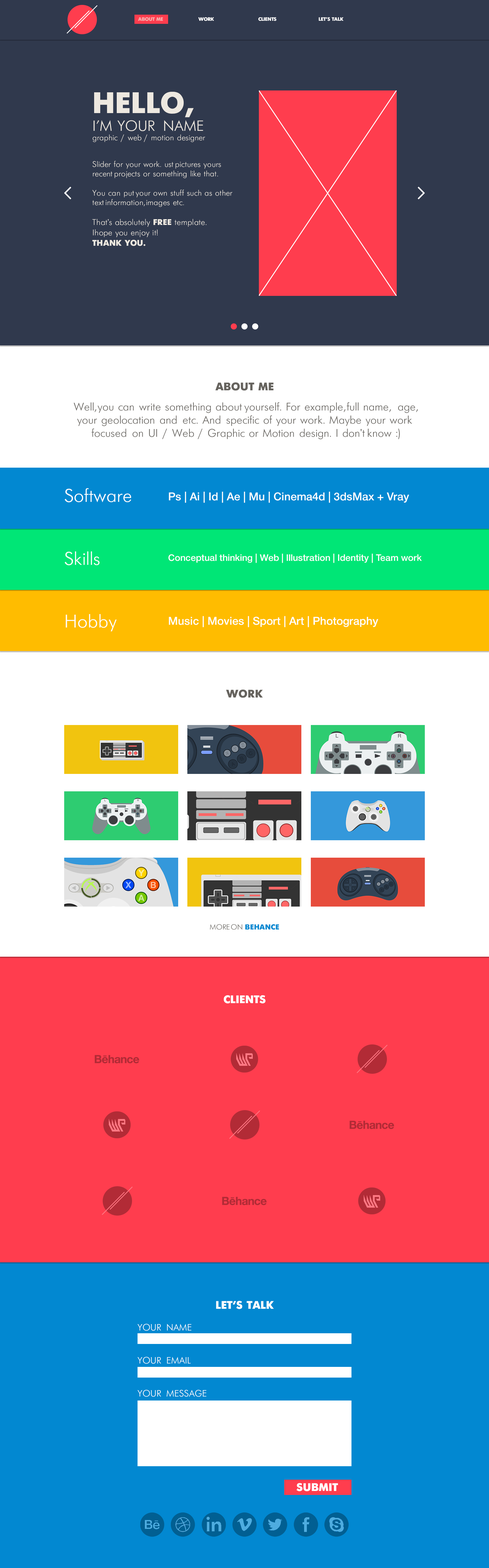
<style>
.page{position:relative;width:489px;height:1568px;background:#ff3d4e}
.page>*{position:absolute;margin:0}
.t1{font:4.9px "Futuris-Bold";letter-spacing:-0.025em;color:#f4b1af;text-transform:uppercase}
.t2{font:4.9px "Futuris-Bold";letter-spacing:-0.025em;color:#ffffff;text-transform:uppercase}
.t3{font:7.9px "Futuris";color:#ede8e0}
.t4{font:29.6px/18.6px "Futuris-Bold";color:#ede8e0;text-transform:uppercase}
.t5{font:14.7px "Futuris";color:#ede8e0;text-transform:uppercase}
.t6{font:7.9px "Futuris";letter-spacing:0.005em;color:#ede8e0}
.t7{font:8.3px/10.4px "Futuris";letter-spacing:0.005em;color:#ede8e0}
.t8{font:8.3px/10.4px "Futuris-Bold";letter-spacing:0.005em;color:#ede8e0;text-transform:uppercase}
.t9{font:11px "Futuris-Bold";color:#66635e}
.t10{font:11px "Futuris";color:#66635e}
.t11{font:18.3px "Futuris";color:#ffffff}
.t12{font:11px "HelveticaNeueCyr-Medium";color:#ffffff}
.t13{font:9.2px "HelveticaNeueCyr-Medium";color:#ffffff}
.t14{font:7.3px "Futuris";color:#66635e}
.t15{font:7.3px "Futuris-Bold";color:#0288d1}
.t16{font:11px "Futuris-Bold";color:#ffffff}
.t17{font:9.2px "Futuris";color:#ffffff}
</style>
<div class="page">
<p class="t1" style="left:138px;top:17px;width:25px;height:4px">About Me</p>
<p class="t2" style="left:198px;top:17px;width:16px;height:4px">Work</p>
<p class="t2" style="left:258px;top:17px;width:19px;height:4px">Clients</p>
<p class="t2" style="left:319px;top:17px;width:25px;height:4px">Let’s talk</p>
<p class="t3" style="left:93px;top:92px;width:112px;height:50px"><span class="t4">HELLO,<br></span><span class="t5">I’M YOUR NAME<br></span>graphic / web / motion designer</p>
<p class="t6" style="left:92px;top:161px;width:141px;height:85px">Slider for your work. ust pictures yours recent projects or something like that.<br><br>You can put your own stuff such as other text information, images etc. <br><br><span class="t7">That's absolutely </span><span class="t8">free </span><span class="t7">template. <br>Ihope you enjoy it!<br></span><span class="t8">Thank you.</span></p>
<p class="t9" style="left:215px;top:382px;width:59px;height:9px">ABOUT ME</p>
<p class="t10" style="left:74px;top:402px;width:344px;height:37px;text-align:center">Well, you can write something about yourself. For example, full name,  age, your geolocation and etc. And specific of your work. Maybe your work focused on UI / Web / Graphic or Motion design. I don't know :)</p>
<p class="t11" style="left:64px;top:488px;width:67px;height:14px">Software</p>
<p class="t12" style="left:169px;top:491px;width:240px;height:12px">Ps | Ai | Id | Ae | Mu | Cinema4d | 3dsMax + Vray</p>
<p class="t11" style="left:64px;top:551px;width:36px;height:14px">Skills</p>
<p class="t13" style="left:168px;top:554px;width:254px;height:9px">Conceptual thinking | Web | Illustration | Identity | Team work</p>
<p class="t11" style="left:66px;top:614px;width:51px;height:17px">Hobby</p>
<p class="t12" style="left:169px;top:616px;width:209px;height:11px">Music | Movies | Sport | Art | Photography</p>
<p class="t9" style="left:226px;top:690px;width:37px;height:8px">WORK</p>
<p class="t14" style="left:210px;top:924px;width:69px;height:6px">MORE ON <span class="t15">BEHANCE</span></p>
<p class="t16" style="left:224px;top:995px;width:42px;height:8px">CLIENTS</p>
<p class="t16" style="left:216px;top:1301px;width:58px;height:8px">LET’S TALK</p>
<p class="t17" style="left:138px;top:1324px;width:53px;height:7px">YOUR NAME</p>
<p class="t17" style="left:138px;top:1357px;width:53px;height:7px">YOUR EMAIL</p>
<p class="t17" style="left:138px;top:1390px;width:68px;height:7px">YOUR MESSAGE</p>
<p class="t16" style="left:296px;top:1483px;width:42px;height:8px">SUBMIT</p>
</div>
